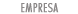
<style>
.page{position:relative;width:78px;height:14px;background:#ffffff}
.page>*{position:absolute;margin:0}
.t1{font:12.1px "FuturaLT-CondensedLight";letter-spacing:0.03em;color:#8b8888;font-weight:bold}
</style>
<div class="page">
<p class="t1" style="left:21px;top:3px;width:38px;height:10px">EMPRESA</p>
</div>
